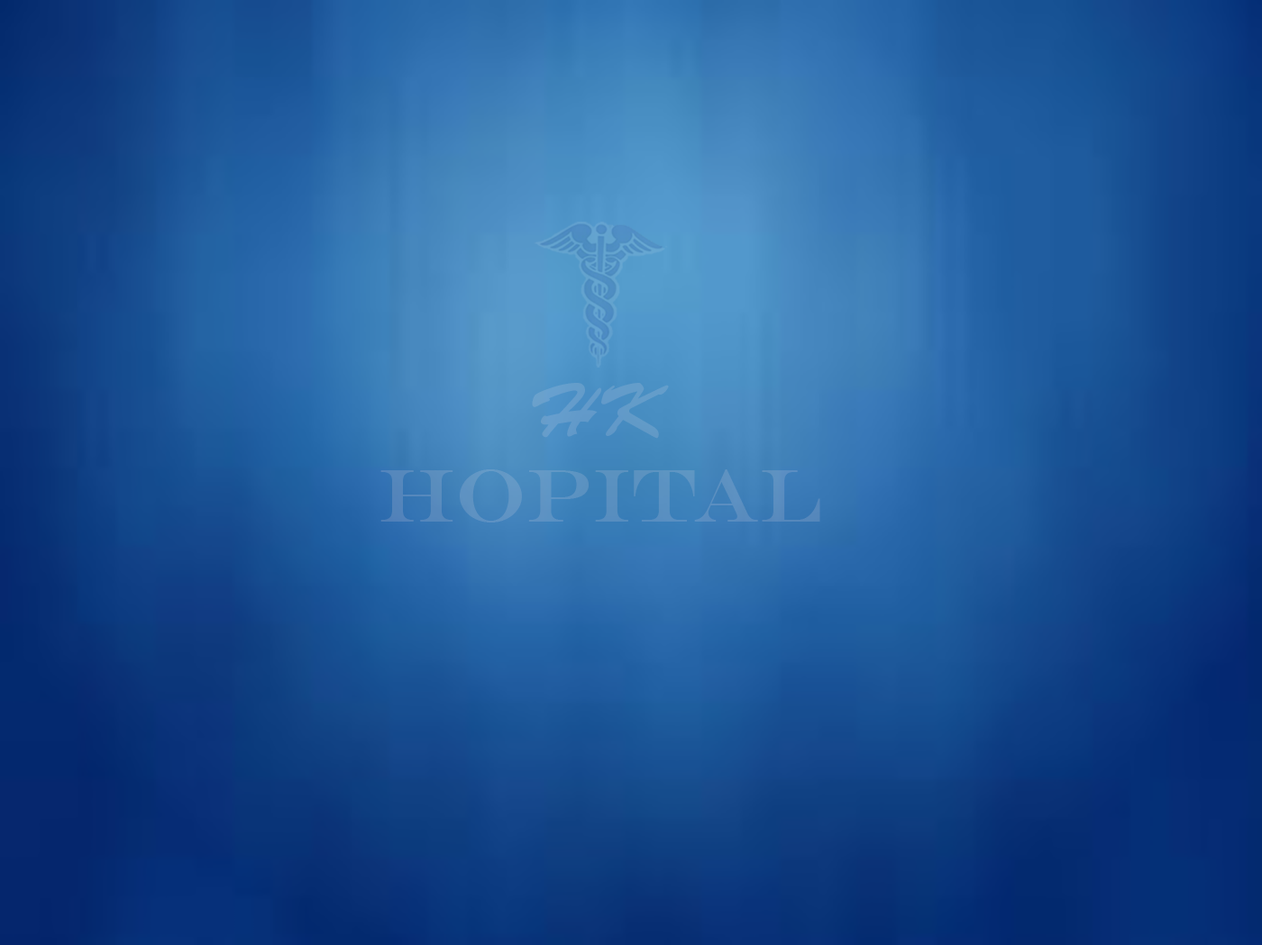
<style>
.page{position:relative;width:1262px;height:945px}
.page>*{position:absolute;margin:0}
.t1{font:75.7px "BrushScriptStd";color:#639cca}
.t2{font:75.7px "EngraversMT";color:#5b90c1}
</style>
<div class="page">
<p class="t1" style="left:532px;top:383px;width:137px;height:56px">HK</p>
<p class="t2" style="left:380px;top:469px;width:440px;height:54px">HOPITAL</p>
</div>
